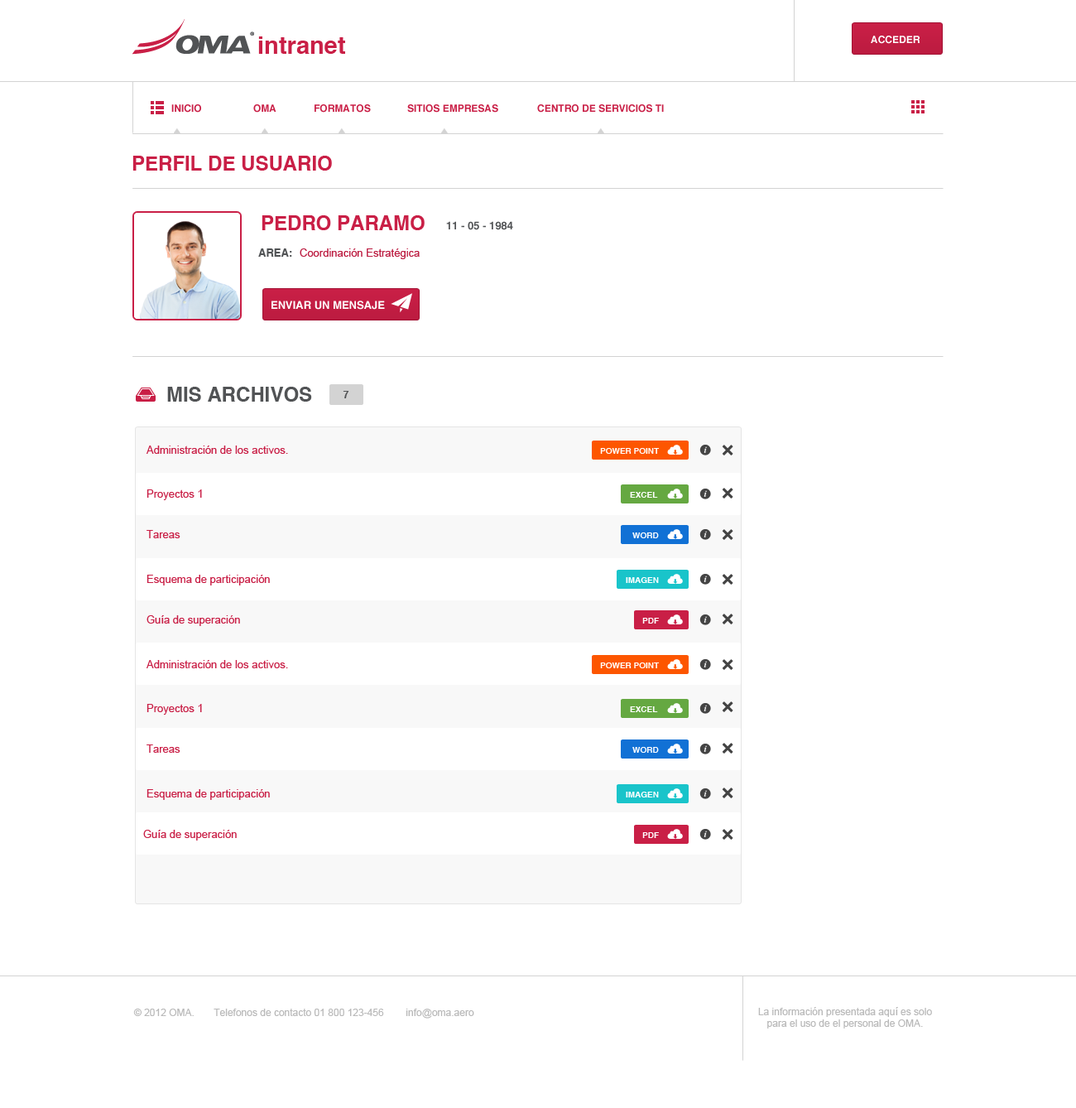
<style>
.page{position:relative;width:1076px;height:1108px;background:#ffffff}
.page>*{position:absolute;margin:0}
.t1{font:24.1px "Helvetica-Bold";color:#c91f46}
.t2{font:9.9px "Helvetica-Bold";color:#ffffff;text-transform:uppercase}
.t3{font:9.9px "Helvetica-Bold";color:#c91f46}
.t4{font:9.9px "Helvetica-Bold";color:#c91f46;text-transform:uppercase}
.t5{font:19.9px "Helvetica-Bold";color:#c91f46;text-transform:uppercase}
.t6{font:10.8px "Helvetica-Bold";color:#515355;text-transform:uppercase}
.t7{font:10.8px "ArialMT";color:#bc1b40}
.t8{font:10.8px "Helvetica-Bold";color:#ffffff;text-transform:uppercase}
.t9{font:19.9px "Helvetica-Bold";color:#515355;text-transform:uppercase}
.t10{font:9.9px "Helvetica-Bold";color:#515355;text-transform:uppercase}
.t11{font:10.8px "ArialMT";color:#c91f46}
.t12{font:8.3px "Helvetica-Bold";color:#ffffff;text-transform:uppercase}
.t13{font:9.9px "ArialMT";color:#b9b9b9}
</style>
<div class="page">
<p class="t1" style="left:258px;top:36px;width:87px;height:18px">intranet</p>
<p class="t2" style="left:871px;top:36px;width:50px;height:8px">Acceder</p>
<p class="t3" style="left:171px;top:104px;width:30px;height:9px">INICIO</p>
<p class="t3" style="left:253px;top:104px;width:24px;height:9px">OMA</p>
<p class="t4" style="left:315px;top:104px;width:56px;height:9px">formatos</p>
<p class="t4" style="left:407px;top:104px;width:91px;height:9px">sitios empresas</p>
<p class="t4" style="left:537px;top:104px;width:127px;height:9px">centro de servicios ti</p>
<p class="t5" style="left:132px;top:156px;width:200px;height:15px">perfil de usuario</p>
<p class="t5" style="left:262px;top:215px;width:163px;height:15px">pedro paramo</p>
<p class="t6" style="left:446px;top:221px;width:67px;height:9px">11 - 05 - 1984</p>
<p class="t6" style="left:258px;top:248px;width:34px;height:9px">area:</p>
<p class="t7" style="left:300px;top:248px;width:120px;height:11px">Coordinación Estratégica</p>
<p class="t8" style="left:272px;top:301px;width:113px;height:9px">enviar un mensaje</p>
<p class="t9" style="left:167px;top:387px;width:145px;height:15px">Mis archivos</p>
<p class="t10" style="left:343px;top:391px;width:6px;height:7px">7</p>
<p class="t11" style="left:147px;top:445px;width:141px;height:9px">Administración de los activos.</p>
<p class="t12" style="left:600px;top:448px;width:60px;height:6px">Power point</p>
<p class="t11" style="left:147px;top:489px;width:55px;height:11px">Proyectos 1</p>
<p class="t12" style="left:630px;top:492px;width:28px;height:6px">excel</p>
<p class="t11" style="left:147px;top:530px;width:33px;height:8px">Tareas</p>
<p class="t12" style="left:633px;top:532px;width:26px;height:6px">word</p>
<p class="t11" style="left:147px;top:575px;width:123px;height:10px">Esquema de participación</p>
<p class="t12" style="left:626px;top:577px;width:33px;height:6px">Imagen</p>
<p class="t11" style="left:147px;top:615px;width:93px;height:11px">Guía de superación</p>
<p class="t12" style="left:643px;top:618px;width:16px;height:5px">PDF</p>
<p class="t11" style="left:147px;top:660px;width:141px;height:8px">Administración de los activos.</p>
<p class="t12" style="left:600px;top:662px;width:60px;height:6px">Power point</p>
<p class="t11" style="left:147px;top:704px;width:55px;height:11px">Proyectos 1</p>
<p class="t12" style="left:630px;top:706px;width:28px;height:6px">excel</p>
<p class="t11" style="left:147px;top:744px;width:33px;height:9px">Tareas</p>
<p class="t12" style="left:633px;top:747px;width:26px;height:6px">word</p>
<p class="t11" style="left:147px;top:789px;width:123px;height:11px">Esquema de participación</p>
<p class="t12" style="left:626px;top:792px;width:33px;height:5px">Imagen</p>
<p class="t11" style="left:143px;top:830px;width:94px;height:10px">Guía de superación</p>
<p class="t12" style="left:643px;top:832px;width:16px;height:6px">PDF</p>
<p class="t13" style="left:133px;top:1008px;width:341px;height:10px">© 2012 OMA.       Telefonos de contacto 01 800 123-456        info@oma.aero</p>
<p class="t13" style="left:758px;top:1007px;width:174px;height:21px;text-align:center">La información presentada aquí es solo<br>para el uso de el personal de OMA.</p>
</div>
